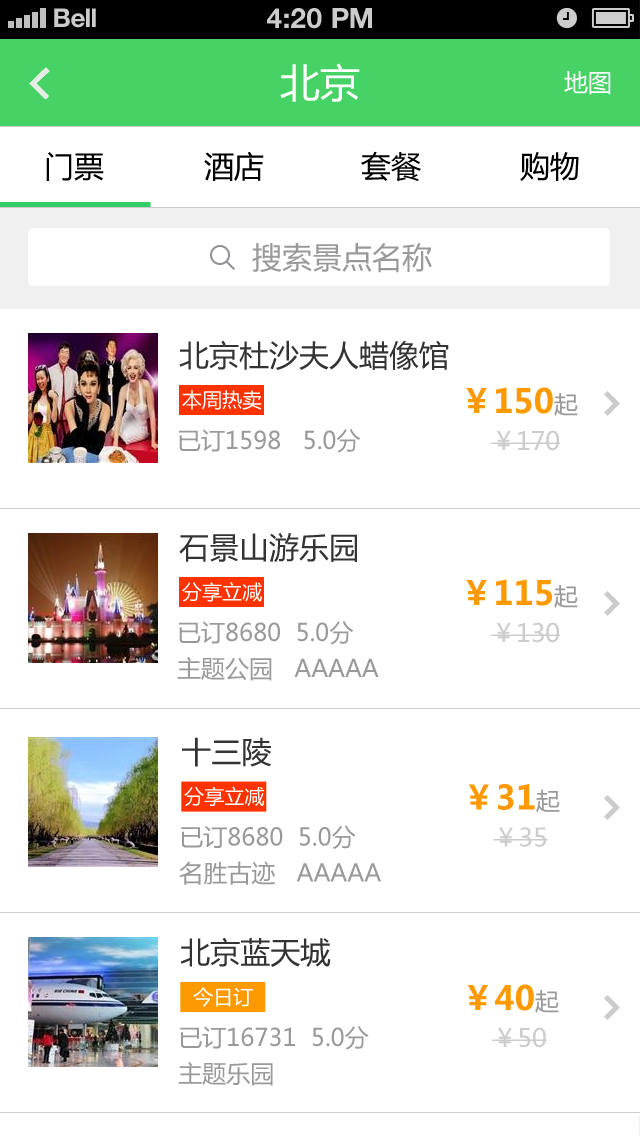
<style>
.page{position:relative;width:640px;height:1136px;background:#ffffff}
.page>*{position:absolute;margin:0}
.t1{font:26px "HelveticaNeue-Bold";color:#cccccc}
.t2{font:28px "HelveticaNeue-Bold";color:#cccccc;text-transform:uppercase}
.t3{font:40px "MicrosoftYaHei";color:#fefefe}
.t4{font:24px "MicrosoftYaHei";color:#ffffff}
.t5{font:30px "MicrosoftYaHei";color:#000000}
.t6{font:30px "MicrosoftYaHei";color:#999999}
.t7{font:30px "MicrosoftYaHei";color:#333333}
.t8{font:20px "MicrosoftYaHei";color:#ffffff}
.t9{font:33px "MicrosoftYaHei-Bold";color:#ff9900}
.t10{font:24px "MicrosoftYaHei";color:#999999}
.t11{font:25px "MicrosoftYaHei";color:#cccccc}
</style>
<div class="page">
<p class="t1" style="left:54px;top:8px;width:42px;height:20px">Bell</p>
<p class="t2" style="left:267px;top:8px;width:105px;height:21px">4:20 pM</p>
<p class="t3" style="left:280px;top:63px;width:80px;height:39px">北京</p>
<p class="t4" style="left:564px;top:71px;width:47px;height:24px">地图</p>
<p class="t5" style="left:46px;top:152px;width:58px;height:29px">门票</p>
<p class="t5" style="left:204px;top:151px;width:60px;height:30px">酒店</p>
<p class="t5" style="left:361px;top:151px;width:60px;height:31px">套餐</p>
<p class="t5" style="left:520px;top:152px;width:59px;height:29px">购物</p>
<p class="t6" style="left:252px;top:243px;width:180px;height:30px">搜索景点名称</p>
<p class="t7" style="left:179px;top:340px;width:270px;height:30px">北京杜沙夫人蜡像馆</p>
<p class="t8" style="left:182px;top:390px;width:80px;height:20px">本周热卖</p>
<p class="t9" style="left:466px;top:387px;width:112px;height:29px">￥150<span class="t10">起</span></p>
<p class="t10" style="left:179px;top:429px;width:182px;height:24px">已订1598   5.0分</p>
<p class="t11" style="left:491px;top:430px;width:69px;height:21px">￥170</p>
<p class="t7" style="left:179px;top:533px;width:178px;height:30px">石景山游乐园</p>
<p class="t8" style="left:182px;top:582px;width:80px;height:20px">分享立减</p>
<p class="t9" style="left:466px;top:579px;width:112px;height:29px">￥115<span class="t10">起</span></p>
<p class="t10" style="left:179px;top:621px;width:175px;height:24px">已订8680  5.0分</p>
<p class="t11" style="left:491px;top:622px;width:69px;height:21px">￥130</p>
<p class="t10" style="left:177px;top:657px;width:202px;height:24px">主题公园   AAAAA</p>
<p class="t7" style="left:182px;top:737px;width:89px;height:30px">十三陵</p>
<p class="t9" style="left:468px;top:784px;width:92px;height:29px">￥31<span class="t10">起</span></p>
<p class="t8" style="left:184px;top:786px;width:81px;height:20px">分享立减</p>
<p class="t10" style="left:181px;top:825px;width:175px;height:24px">已订8680  5.0分</p>
<p class="t11" style="left:493px;top:827px;width:55px;height:20px">￥35</p>
<p class="t10" style="left:179px;top:861px;width:202px;height:24px">名胜古迹   AAAAA</p>
<p class="t7" style="left:180px;top:937px;width:151px;height:30px">北京蓝天城</p>
<p class="t8" style="left:193px;top:987px;width:60px;height:20px">今日订</p>
<p class="t9" style="left:467px;top:984px;width:92px;height:29px">￥40<span class="t10">起</span></p>
<p class="t10" style="left:180px;top:1026px;width:189px;height:24px">已订16731  5.0分</p>
<p class="t11" style="left:492px;top:1027px;width:55px;height:21px">￥50</p>
<p class="t10" style="left:178px;top:1062px;width:95px;height:24px">主题乐园</p>
</div>
